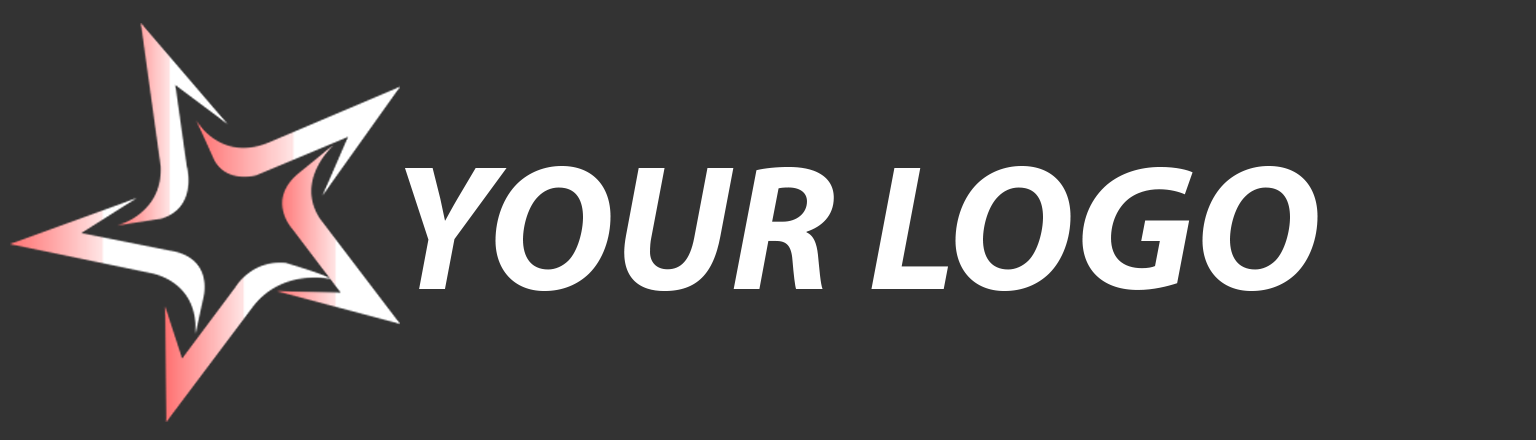
<style>
.page{position:relative;width:1536px;height:440px;background:#333333}
.page>*{position:absolute;margin:0}
.t1{font:179.2px "MyriadPro-BoldIt";color:#ffffff}
</style>
<div class="page">
<p class="t1" style="left:405px;top:166px;width:913px;height:126px">YOUR LOGO</p>
</div>
